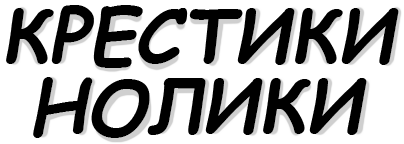
<style>
.page{position:relative;width:404px;height:144px;background:#ffffff}
.page>*{position:absolute;margin:0}
.t1{font:75px "ComicSansMS-BoldItalic";color:#000000}
</style>
<div class="page">
<p class="t1" style="left:6px;top:5px;width:393px;height:63px">КРЕСТИКИ</p>
<p class="t1" style="left:33px;top:77px;width:334px;height:61px">НОЛИКИ</p>
</div>
